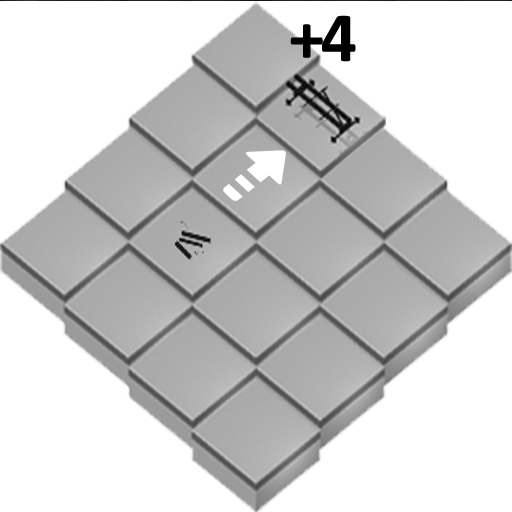
<style>
.page{position:relative;width:512px;height:512px;background:#ffffff}
.page>*{position:absolute;margin:0}
.t1{font:71px "Calibri-Bold";letter-spacing:-0.05em;color:#000000}
</style>
<div class="page">
<p class="t1" style="left:290px;top:14px;width:66px;height:47px">+4</p>
</div>
